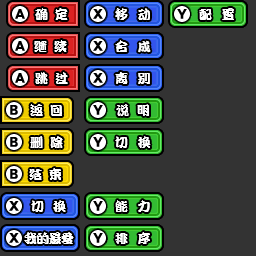
<style>
.page{position:relative;width:256px;height:256px;background:#333333}
.page>*{position:absolute;margin:0}
.t1{font:13px "DFPKanTingLiuW9";letter-spacing:-0.025em;color:#ffffff}
.t2{font:13px "DFPKanTingLiuW9";letter-spacing:0.05em;color:#ffffff}
.t3{font:12.3px "DFPKanTingLiuW9";letter-spacing:0.05em;color:#ffffff;scale:1.05 1}
.t4{font:13px "DFPKanTingLiuW9";color:#ffffff}
.t5{font:13px "DFPKanTingLiuW9";letter-spacing:0.025em;color:#ffffff}
.t6{font:13px "DFPKanTingLiuW9";letter-spacing:-0.05em;color:#ffffff}
</style>
<div class="page">
<p class="t1" style="left:35px;top:8px;width:33px;height:12px">确  定</p>
<p class="t2" style="left:115px;top:8px;width:35px;height:12px">移  动</p>
<p class="t2" style="left:199px;top:8px;width:35px;height:12px">配  置</p>
<p class="t1" style="left:34px;top:40px;width:33px;height:12px">继  续</p>
<p class="t2" style="left:115px;top:40px;width:36px;height:13px">合  <span class="t3">成</span></p>
<p class="t1" style="left:35px;top:72px;width:33px;height:12px">跳  过</p>
<p class="t2" style="left:115px;top:72px;width:35px;height:12px">离  别</p>
<p class="t1" style="left:30px;top:104px;width:32px;height:12px">返  回</p>
<p class="t4" style="left:116px;top:104px;width:33px;height:12px">说  明</p>
<p class="t1" style="left:30px;top:136px;width:33px;height:12px">删  除</p>
<p class="t2" style="left:115px;top:136px;width:36px;height:12px">切  换</p>
<p class="t1" style="left:29px;top:168px;width:32px;height:12px">结  束</p>
<p class="t5" style="left:31px;top:200px;width:35px;height:12px">切  换</p>
<p class="t2" style="left:115px;top:200px;width:35px;height:12px">能  力</p>
<p class="t6" style="left:24px;top:232px;width:50px;height:12px">我的最爱</p>
<p class="t2" style="left:115px;top:232px;width:35px;height:12px">排  序</p>
</div>
